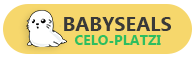
<style>
.page{position:relative;width:194px;height:61px;background:#f6d76c}
.page>*{position:absolute;margin:0}
.t1{font:20px "Gadugi-Bold";color:#393939}
.t2{font:14px "Gadugi-Bold";color:#2dbe60}
</style>
<div class="page">
<p class="t1" style="left:64px;top:17px;width:107px;height:14px">BABYSEALS</p>
<p class="t2" style="left:74px;top:35px;width:87px;height:10px">CELO-PLATZI</p>
</div>
